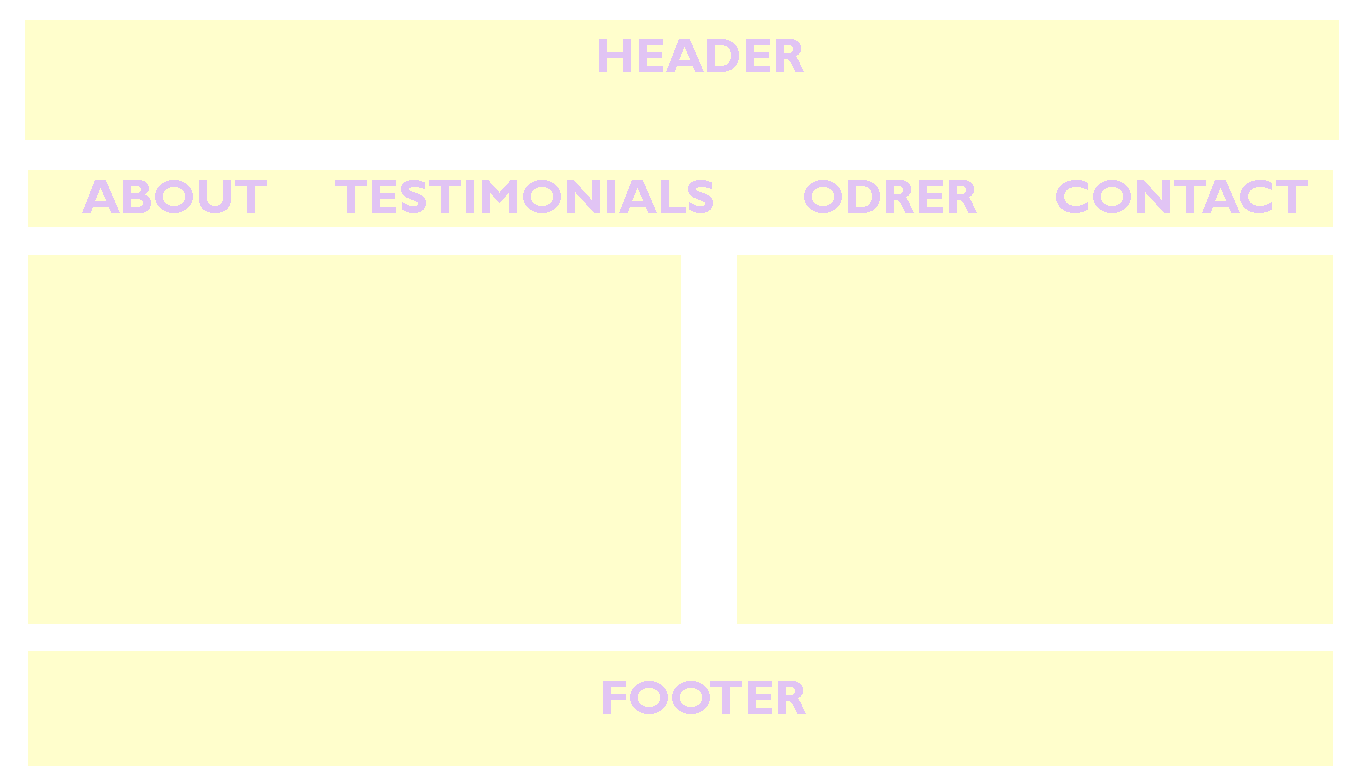
<style>
.page{position:relative;width:1366px;height:768px;background:#fffecc}
.page>*{position:absolute;margin:0}
.t1{font:48px "GillSansMT-Bold";color:#e1c4f4}
</style>
<div class="page">
<p class="t1" style="left:599px;top:39px;width:205px;height:33px">HEADER</p>
<p class="t1" style="left:82px;top:180px;width:1226px;height:33px">ABOUT  TESTIMONIALS   ODRER   CONTACT</p>
<p class="t1" style="left:603px;top:681px;width:203px;height:33px">FOOTER</p>
</div>
